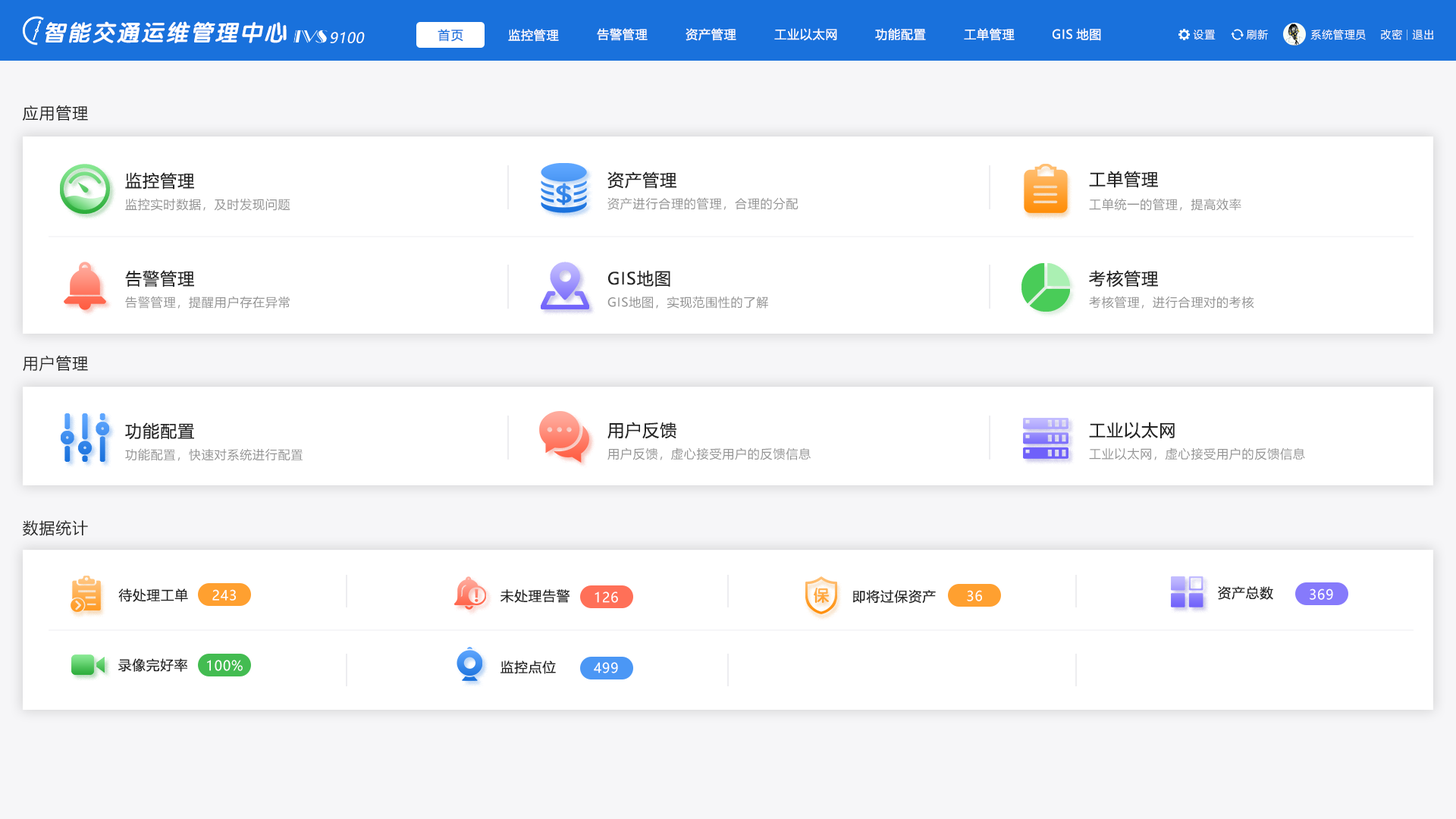
<style>
.page{position:relative;width:1456px;height:819px;background:#ffffff}
.page>*{position:absolute;margin:0}
.t1{font:22.7px "VeraSansYuanTiMono-BoldItalic";letter-spacing:0.08em;color:#ffffff}
.t2{font:12.1px "MicrosoftYaHei";letter-spacing:0.1em;color:#1971dc}
.t3{font:12.1px "MicrosoftYaHei";letter-spacing:0.05em;color:#ffffff}
.t4{font:10.6px "MicrosoftYaHei";letter-spacing:0.05em;color:#ffffff}
.t5{font:14.2px "MicrosoftYaHei";letter-spacing:0.03em;color:#ffffff;font-style:italic}
.t6{font:15.8px "MicrosoftYaHei";letter-spacing:0.05em;color:#242424}
.t7{font:16.7px "MicrosoftYaHei";letter-spacing:0.05em;color:#242424}
.t8{font:12.1px "MicrosoftYaHei";letter-spacing:0.05em;color:#949494}
.t9{font:13.3px "MicrosoftYaHei";letter-spacing:0.05em;color:#242424}
.t10{font:13.5px "MicrosoftYaHei";letter-spacing:0.05em;color:#ffffff}
</style>
<div class="page">
<p class="t1" style="left:45px;top:21px;width:242px;height:22px">智能交通运维管理中心</p>
<p class="t2" style="left:438px;top:29px;width:25px;height:13px">首页</p>
<p class="t3" style="left:508px;top:29px;width:51px;height:13px">监控管理</p>
<p class="t3" style="left:597px;top:28px;width:51px;height:13px">告警管理</p>
<p class="t3" style="left:686px;top:28px;width:50px;height:13px">资产管理</p>
<p class="t3" style="left:774px;top:28px;width:63px;height:13px">工业以太网</p>
<p class="t3" style="left:875px;top:28px;width:51px;height:13px">功能配置</p>
<p class="t3" style="left:964px;top:28px;width:51px;height:13px">工单管理</p>
<p class="t3" style="left:1053px;top:28px;width:48px;height:13px">GIS地图</p>
<p class="t4" style="left:1193px;top:30px;width:23px;height:10px">设置</p>
<p class="t4" style="left:1246px;top:29px;width:22px;height:11px">刷新</p>
<p class="t4" style="left:1310px;top:29px;width:56px;height:11px">系统管理员</p>
<p class="t4" style="left:1381px;top:29px;width:21px;height:11px">改密</p>
<p class="t4" style="left:1412px;top:30px;width:21px;height:10px">退出</p>
<p class="t5" style="left:330px;top:32px;width:35px;height:11px">9100</p>
<p class="t6" style="left:22px;top:105px;width:66px;height:16px">应用管理</p>
<p class="t7" style="left:125px;top:172px;width:69px;height:18px">监控管理</p>
<p class="t7" style="left:607px;top:171px;width:69px;height:18px">资产管理</p>
<p class="t7" style="left:1089px;top:171px;width:69px;height:17px">工单管理</p>
<p class="t8" style="left:125px;top:198px;width:165px;height:13px">监控实时数据，及时发现问题</p>
<p class="t8" style="left:607px;top:197px;width:192px;height:13px">资产进行合理的管理，合理的分配</p>
<p class="t8" style="left:1089px;top:198px;width:152px;height:13px">工单统一的管理，提高效率</p>
<p class="t7" style="left:125px;top:270px;width:69px;height:17px">告警管理</p>
<p class="t7" style="left:608px;top:270px;width:62px;height:17px">GIS地图</p>
<p class="t7" style="left:1089px;top:270px;width:69px;height:17px">考核管理</p>
<p class="t8" style="left:125px;top:296px;width:165px;height:13px">告警管理，提醒用户存在异常</p>
<p class="t8" style="left:607px;top:296px;width:161px;height:13px">GIS地图，实现范围性的了解</p>
<p class="t8" style="left:1089px;top:296px;width:165px;height:13px">考核管理，进行合理对的考核</p>
<p class="t6" style="left:23px;top:356px;width:65px;height:16px">用户管理</p>
<p class="t7" style="left:125px;top:422px;width:69px;height:18px">功能配置</p>
<p class="t7" style="left:607px;top:422px;width:69px;height:17px">用户反馈</p>
<p class="t7" style="left:1089px;top:422px;width:86px;height:17px">工业以太网</p>
<p class="t8" style="left:125px;top:448px;width:178px;height:13px">功能配置，快速对系统进行配置</p>
<p class="t8" style="left:607px;top:447px;width:204px;height:13px">用户反馈，虚心接受用户的反馈信息</p>
<p class="t8" style="left:1089px;top:447px;width:216px;height:13px">工业以太网，虚心接受用户的反馈信息</p>
<p class="t6" style="left:23px;top:520px;width:65px;height:16px">数据统计</p>
<p class="t9" style="left:118px;top:588px;width:70px;height:14px">待处理工单</p>
<p class="t10" style="left:212px;top:589px;width:24px;height:12px">243</p>
<p class="t9" style="left:500px;top:589px;width:70px;height:14px">未处理告警</p>
<p class="t10" style="left:595px;top:591px;width:23px;height:12px">126</p>
<p class="t9" style="left:852px;top:589px;width:84px;height:15px">即将过保资产</p>
<p class="t10" style="left:967px;top:590px;width:15px;height:11px">36</p>
<p class="t9" style="left:1218px;top:586px;width:55px;height:14px">资产总数</p>
<p class="t10" style="left:1310px;top:588px;width:23px;height:12px">369</p>
<p class="t9" style="left:118px;top:658px;width:69px;height:14px">录像完好率</p>
<p class="t10" style="left:207px;top:660px;width:36px;height:11px">100%</p>
<p class="t9" style="left:500px;top:660px;width:56px;height:14px">监控点位</p>
<p class="t10" style="left:594px;top:662px;width:24px;height:11px">499</p>
</div>
